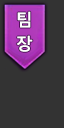
<style>
.page{position:relative;width:64px;height:128px;background:#333333}
.page>*{position:absolute;margin:0}
.t1{font:17px "MalgunGothicBold";color:#ffffff}
</style>
<div class="page">
<p class="t1" style="left:16px;top:11px;width:17px;height:41px;text-align:center">팀 장</p>
</div>
